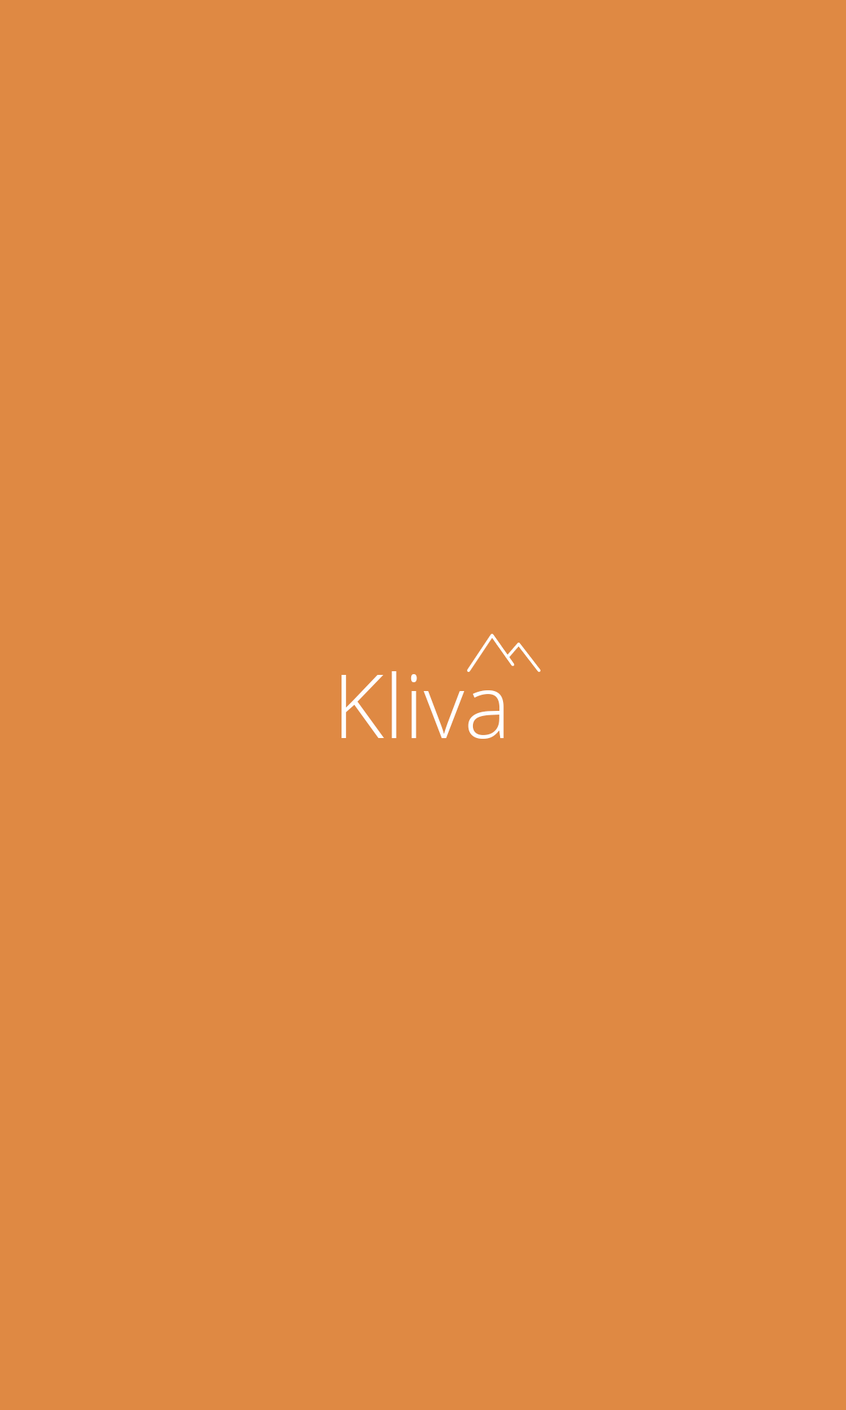
<style>
.page{position:relative;width:846px;height:1410px;background:#df8943}
.page>*{position:absolute;margin:0}
.t1{font:88.1px "OpenSans-Light";color:#ffffff}
</style>
<div class="page">
<p class="t1" style="left:341px;top:671px;width:163px;height:68px">Kliva</p>
</div>
